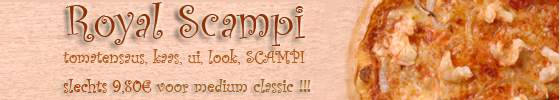
<style>
.page{position:relative;width:560px;height:100px}
.page>*{position:absolute;margin:0}
.t1{font:48px "CurlzMT";color:#932e07}
.t2{font:18px "CurlzMT";color:#af581b}
.t3{font:18px "CurlzMT";color:#b83b04}
</style>
<div class="page">
<p class="t1" style="left:66px;top:2px;width:239px;height:44px">Royal Scampi</p>
<p class="t2" style="left:63px;top:49px;width:242px;height:16px">tomatensaus, kaas, ui, look, SCAMPI</p>
<p class="t2" style="left:63px;top:79px;width:248px;height:15px"><span class="t3">slechts 9,80€</span> voor medium classic !!!</p>
</div>
